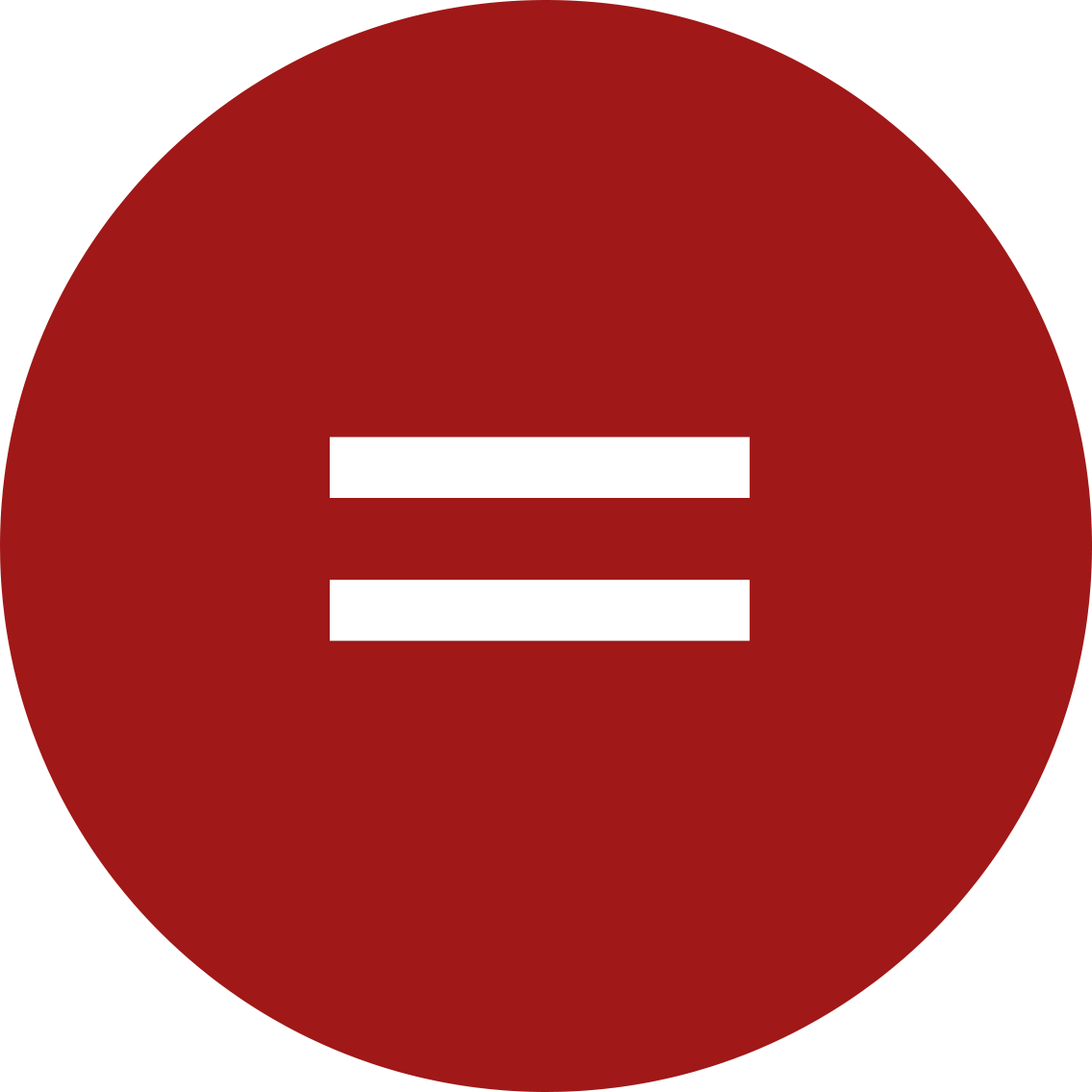
<style>
.page{position:relative;width:1092px;height:1092px;background:#a01818}
.page>*{position:absolute;margin:0}
.t1{font:898.8px "FranklinGothic-Book";color:#ffffff}
</style>
<div class="page">
<p class="t1" style="left:330px;top:436px;width:420px;height:205px">=</p>
</div>
